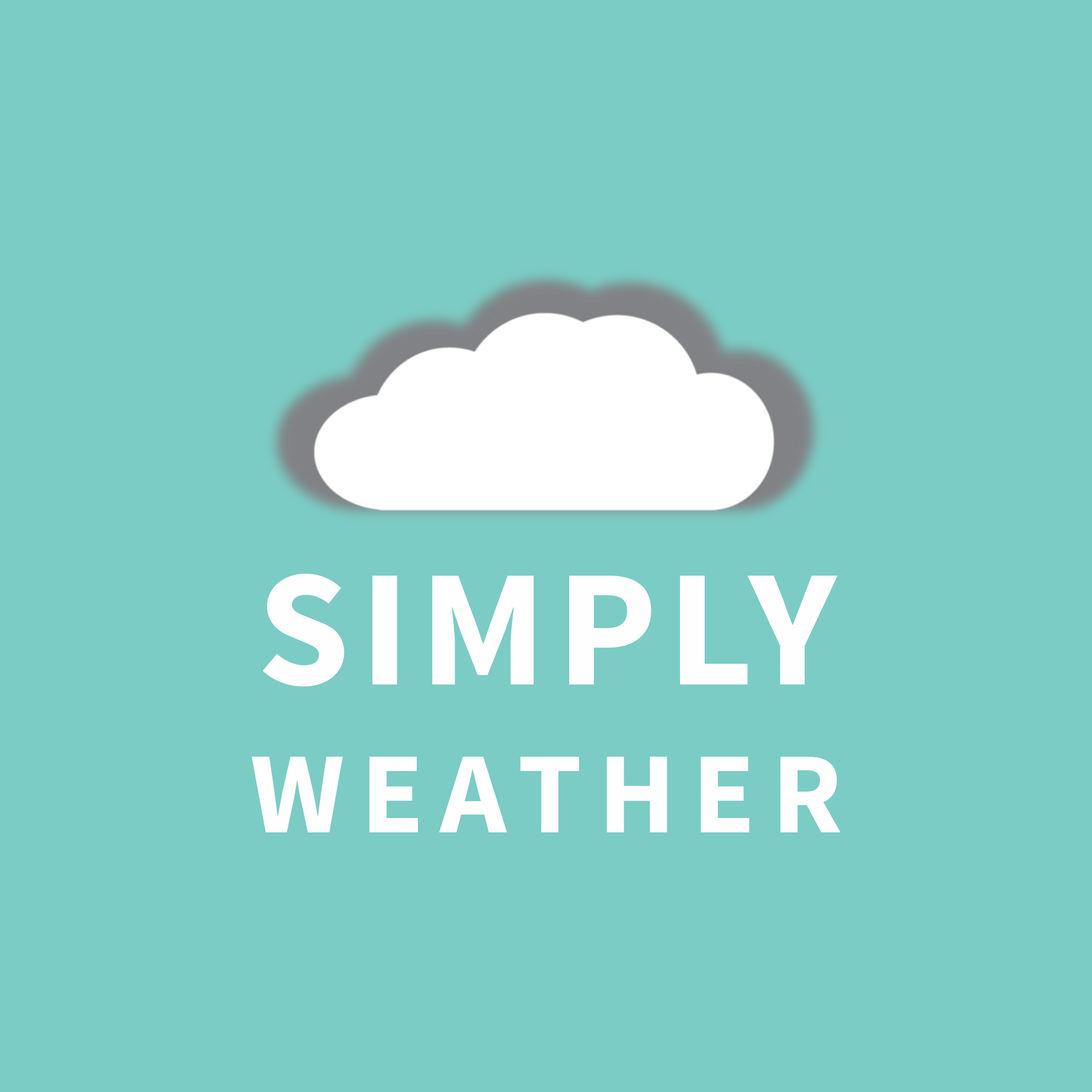
<style>
.page{position:relative;width:1092px;height:1092px;background:#7bccc5}
.page>*{position:absolute;margin:0}
.t1{font:115.7px/148.1px "SourceSansPro-Bold";letter-spacing:0.14em;color:#fffefe}
.t2{font:166.6px/148.1px "SourceSansPro-Bold";letter-spacing:0.06em;color:#fffefe}
</style>
<div class="page">
<p class="t1" style="left:252px;top:574px;width:589px;height:258px;text-align:center"><span class="t2">SIMPLY<br></span>WEATHER</p>
</div>
